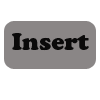
<style>
.page{position:relative;width:100px;height:100px;background:#ffffff}
.page>*{position:absolute;margin:0}
.t1{font:24px "CooperBlackStd";color:#0b0a0a}
</style>
<div class="page">
<p class="t1" style="left:12px;top:33px;width:77px;height:18px">Insert</p>
</div>
